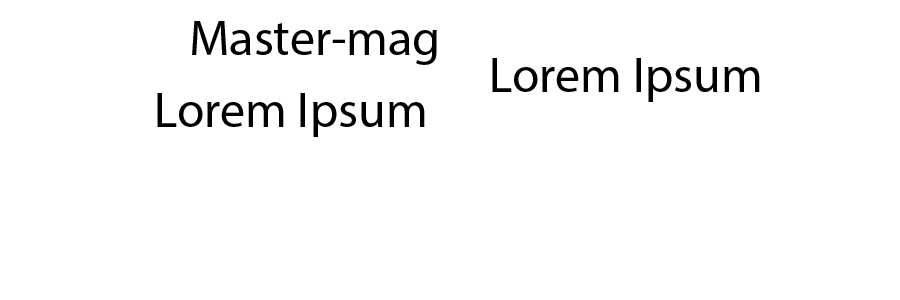
<style>
.page{position:relative;width:900px;height:300px;background:#ffffff}
.page>*{position:absolute;margin:0}
.t1{font:50px "MyriadPro-Regular";color:#000000}
</style>
<div class="page">
<p class="t1" style="left:192px;top:21px;width:245px;height:44px">Master-mag</p>
<p class="t1" style="left:492px;top:58px;width:268px;height:44px">Lorem Ipsum</p>
<p class="t1" style="left:157px;top:93px;width:268px;height:44px">Lorem Ipsum</p>
</div>
